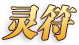
<style>
.page{position:relative;width:79px;height:45px}
.page>*{position:absolute;margin:0}
.t1{font:35.1px "FZCSJW--GB1-0";text-transform:uppercase;font-style:italic}
</style>
<div class="page">
<p class="t1" style="left:2px;top:5px;width:74px;height:35px">灵符</p>
</div>
